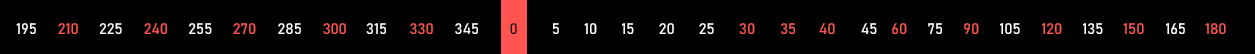
<style>
.page{position:relative;width:1255px;height:54px;background:#000000}
.page>*{position:absolute;margin:0}
.t1{font:15px "Bahnschrift_380wght";color:#fffefe}
.t2{font:15px "Bahnschrift_380wght";color:#ff544f}
.t3{font:15px "Bahnschrift_380wght";color:#ffffff}
.t4{font:15px "Bahnschrift_380wght";color:#000000}
</style>
<div class="page">
<p class="t1" style="left:16px;top:23px;width:20px;height:11px">195</p>
<p class="t2" style="left:58px;top:23px;width:20px;height:11px">210</p>
<p class="t1" style="left:99px;top:23px;width:23px;height:11px">225</p>
<p class="t2" style="left:144px;top:23px;width:23px;height:11px">240</p>
<p class="t3" style="left:189px;top:23px;width:23px;height:11px">255</p>
<p class="t2" style="left:233px;top:23px;width:23px;height:11px">270</p>
<p class="t3" style="left:278px;top:23px;width:23px;height:11px">285</p>
<p class="t2" style="left:323px;top:23px;width:23px;height:11px">300</p>
<p class="t3" style="left:366px;top:23px;width:20px;height:11px">315</p>
<p class="t2" style="left:410px;top:23px;width:23px;height:11px">330</p>
<p class="t3" style="left:455px;top:23px;width:23px;height:11px">345</p>
<p class="t4" style="left:510px;top:23px;width:7px;height:11px">0</p>
<p class="t3" style="left:553px;top:23px;width:6px;height:11px">5</p>
<p class="t3" style="left:584px;top:23px;width:13px;height:11px">10</p>
<p class="t3" style="left:622px;top:23px;width:12px;height:11px">15</p>
<p class="t3" style="left:659px;top:23px;width:15px;height:11px">20</p>
<p class="t3" style="left:699px;top:23px;width:15px;height:11px">25</p>
<p class="t2" style="left:739px;top:23px;width:16px;height:11px">30</p>
<p class="t2" style="left:781px;top:23px;width:14px;height:11px">35</p>
<p class="t2" style="left:819px;top:23px;width:16px;height:11px">40</p>
<p class="t3" style="left:861px;top:23px;width:16px;height:11px">45</p>
<p class="t2" style="left:892px;top:23px;width:15px;height:11px">60</p>
<p class="t3" style="left:928px;top:23px;width:14px;height:11px">75</p>
<p class="t2" style="left:964px;top:23px;width:15px;height:11px">90</p>
<p class="t3" style="left:1000px;top:23px;width:20px;height:11px">105</p>
<p class="t2" style="left:1042px;top:23px;width:20px;height:11px">120</p>
<p class="t3" style="left:1083px;top:23px;width:20px;height:11px">135</p>
<p class="t2" style="left:1123px;top:23px;width:21px;height:11px">150</p>
<p class="t3" style="left:1166px;top:23px;width:19px;height:11px">165</p>
<p class="t2" style="left:1205px;top:23px;width:21px;height:11px">180</p>
</div>
